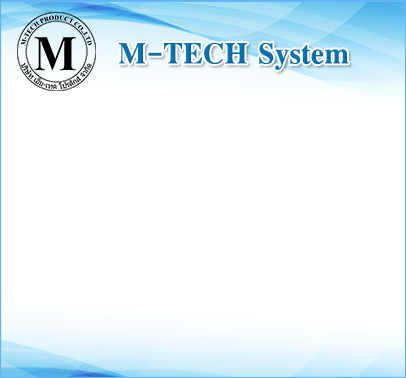
<style>
.page{position:relative;width:406px;height:378px;background:#ffffff}
.page>*{position:absolute;margin:0}
.t1{font:45.8px "EucrosiaUPCBold";color:#0074b4}
</style>
<div class="page">
<p class="t1" style="left:118px;top:42px;width:231px;height:28px">M-TECH System</p>
</div>
